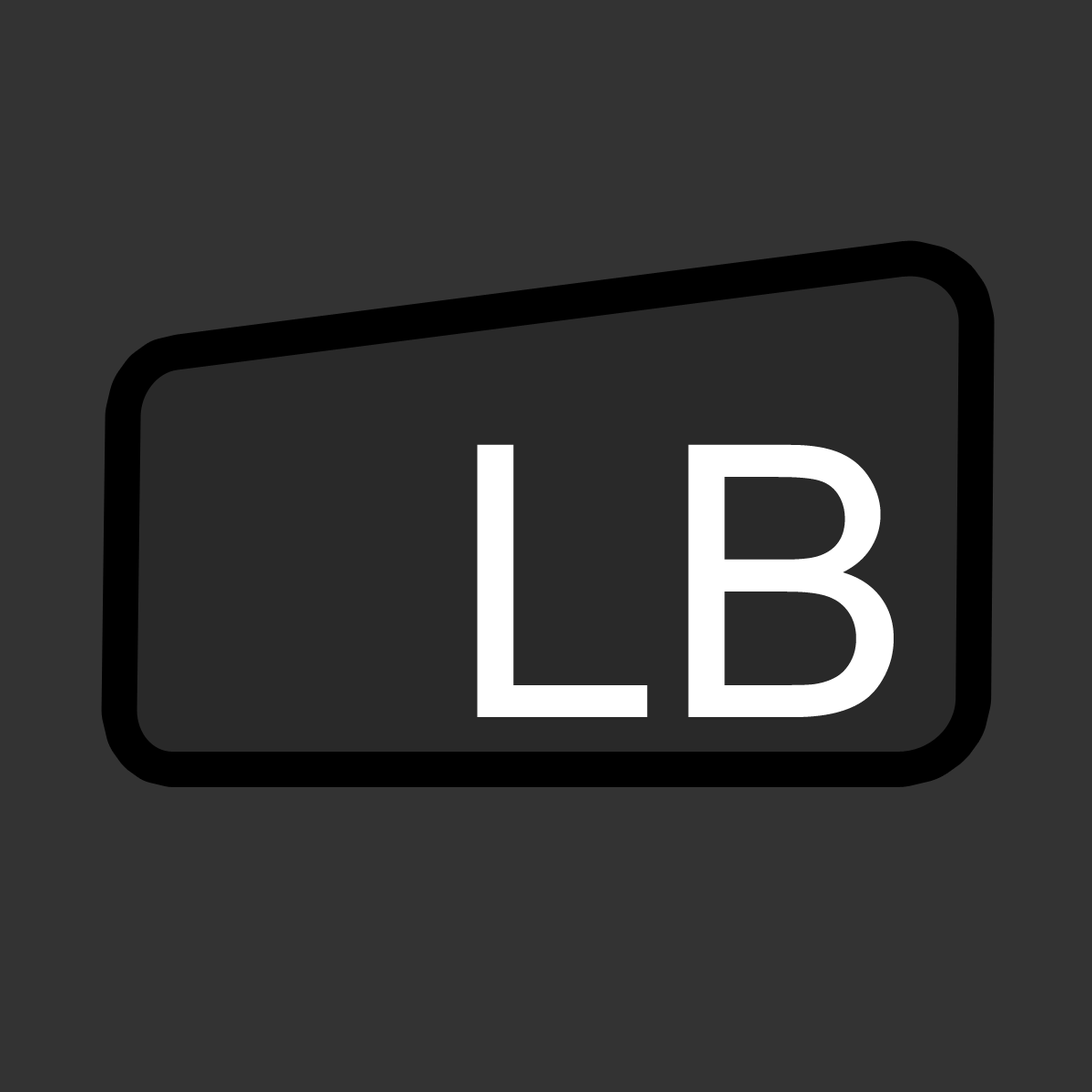
<style>
.page{position:relative;width:1092px;height:1092px;background:#333333}
.page>*{position:absolute;margin:0}
.t1{font:379.2px "ArialMT";color:#ffffff}
</style>
<div class="page">
<p class="t1" style="left:477px;top:444px;width:417px;height:273px">LB</p>
</div>
